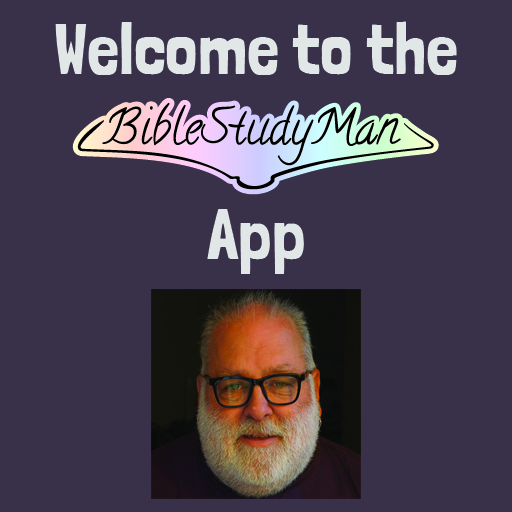
<style>
.page{position:relative;width:512px;height:512px;background:#393049}
.page>*{position:absolute;margin:0}
.t1{font:72px "LondrinaSolid-Regular";color:#e0e7e6}
</style>
<div class="page">
<p class="t1" style="left:55px;top:21px;width:402px;height:54px">Welcome to the</p>
<p class="t1" style="left:207px;top:209px;width:97px;height:65px">App</p>
</div>
